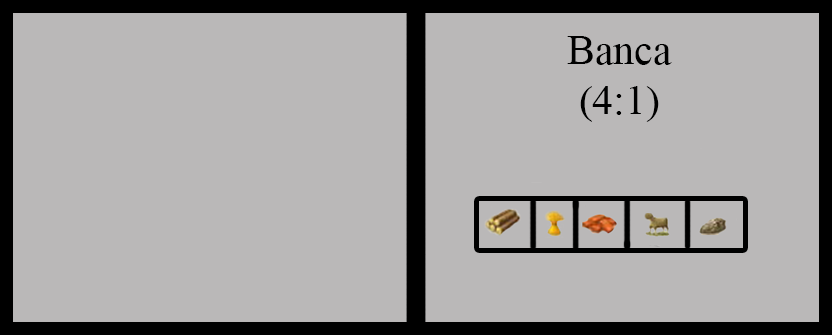
<style>
.page{position:relative;width:832px;height:335px;background:#bab8b8}
.page>*{position:absolute;margin:0}
.t1{font:41.7px "TimesNewRomanPSMT";color:#000000}
</style>
<div class="page">
<p class="t1" style="left:567px;top:36px;width:105px;height:86px;text-align:center">Banca<br>(4:1)</p>
</div>
